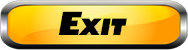
<style>
.page{position:relative;width:188px;height:50px}
.page>*{position:absolute;margin:0}
.t1{font:22px "GillSans-UltraBold";letter-spacing:-0.025em;color:#000000;font-style:italic}
.t2{font:31.4px "GillSans-UltraBold";letter-spacing:-0.025em;color:#000000;font-style:italic}
</style>
<div class="page">
<p class="t1" style="left:58px;top:11px;width:69px;height:24px"><span class="t2">E</span>XIT</p>
</div>
